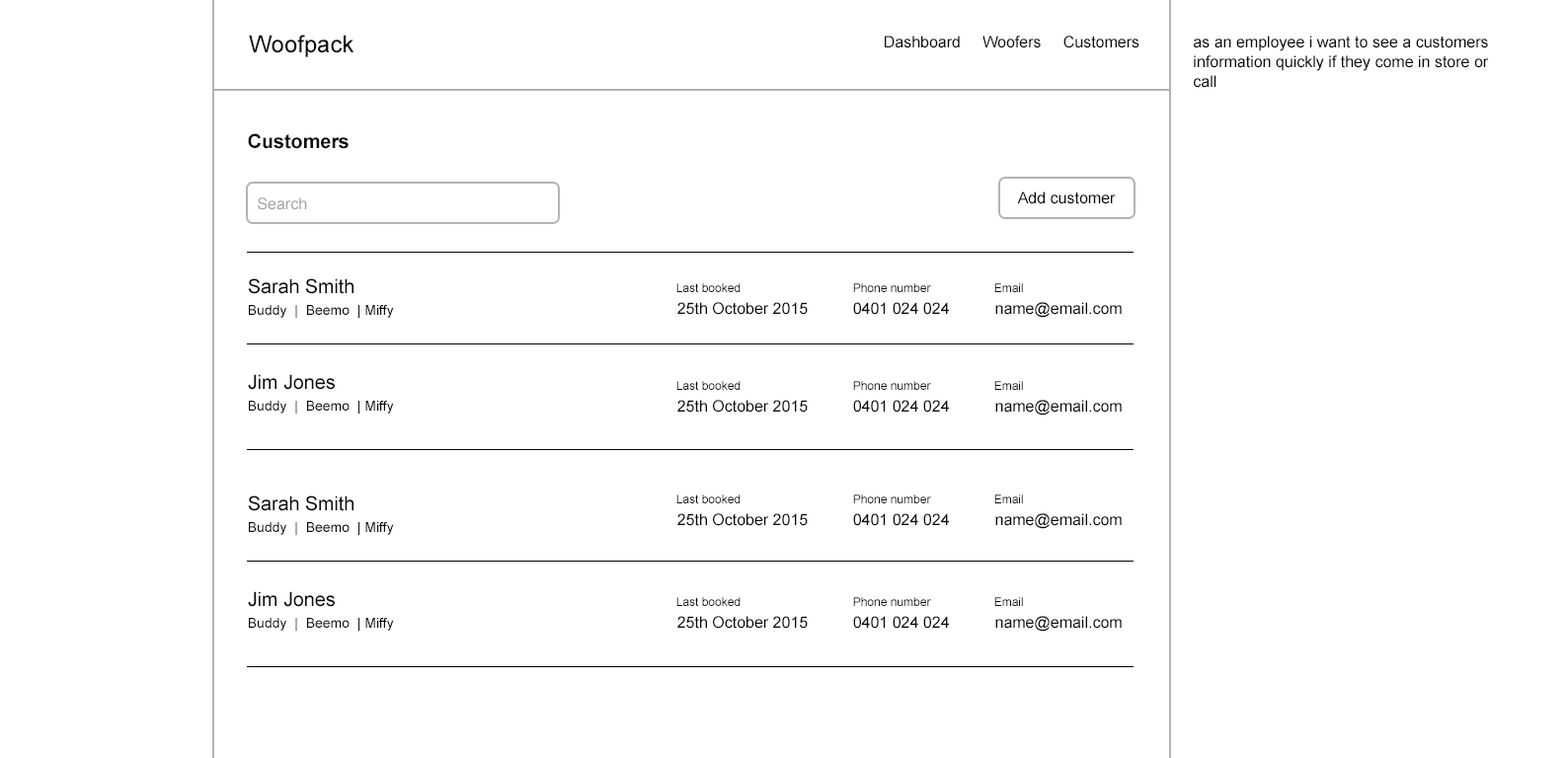
<style>
.page{position:relative;width:1568px;height:758px;background:#ffffff}
.page>*{position:absolute;margin:0}
.t1{font:23.7px "ArialMT";color:#0c0b0b}
.t2{font:15.8px "ArialMT";color:#0c0b0b}
.t3{font:15.8px/19.7px "ArialMT";color:#0c0b0b}
.t4{font:19.5px "Arial-BoldMT";color:#0c0b0b}
.t5{font:15.8px "ArialMT";color:#a5a5a5}
.t6{font:19.5px "ArialMT";color:#0c0b0b}
.t7{font:11.8px "ArialMT";color:#0c0b0b}
.t8{font:13.8px "ArialMT";color:#0c0b0b}
</style>
<div class="page">
<p class="t1" style="left:249px;top:35px;width:105px;height:22px">Woofpack</p>
<p class="t2" style="left:885px;top:36px;width:254px;height:12px">Dashboard     Woofers     Customers</p>
<p class="t3" style="left:1194px;top:36px;width:295px;height:52px">as an employee i want to see a customers information quickly if they come in store or call</p>
<p class="t4" style="left:248px;top:133px;width:101px;height:16px">Customers</p>
<p class="t5" style="left:258px;top:197px;width:49px;height:13px">Search</p>
<p class="t2" style="left:1017px;top:192px;width:99px;height:12px">Add customer</p>
<p class="t6" style="left:248px;top:278px;width:105px;height:16px">Sarah Smith</p>
<p class="t7" style="left:676px;top:283px;width:65px;height:9px">Last booked</p>
<p class="t7" style="left:853px;top:283px;width:78px;height:9px">Phone number</p>
<p class="t7" style="left:994px;top:283px;width:29px;height:9px">Email</p>
<p class="t8" style="left:249px;top:305px;width:145px;height:14px">Buddy  |  Beemo  | Miffy</p>
<p class="t2" style="left:677px;top:302px;width:131px;height:13px">25th October 2015</p>
<p class="t2" style="left:853px;top:302px;width:96px;height:13px">0401 024 024</p>
<p class="t2" style="left:995px;top:302px;width:127px;height:16px">name@email.com</p>
<p class="t6" style="left:248px;top:374px;width:87px;height:16px">Jim Jones</p>
<p class="t7" style="left:676px;top:381px;width:65px;height:9px">Last booked</p>
<p class="t7" style="left:853px;top:381px;width:78px;height:9px">Phone number</p>
<p class="t7" style="left:994px;top:381px;width:29px;height:9px">Email</p>
<p class="t8" style="left:249px;top:401px;width:145px;height:14px">Buddy  |  Beemo  | Miffy</p>
<p class="t2" style="left:677px;top:400px;width:131px;height:13px">25th October 2015</p>
<p class="t2" style="left:853px;top:400px;width:96px;height:13px">0401 024 024</p>
<p class="t2" style="left:995px;top:400px;width:127px;height:16px">name@email.com</p>
<p class="t6" style="left:248px;top:496px;width:105px;height:15px">Sarah Smith</p>
<p class="t7" style="left:676px;top:495px;width:65px;height:9px">Last booked</p>
<p class="t7" style="left:853px;top:495px;width:78px;height:9px">Phone number</p>
<p class="t7" style="left:994px;top:495px;width:29px;height:9px">Email</p>
<p class="t2" style="left:677px;top:513px;width:131px;height:13px">25th October 2015</p>
<p class="t2" style="left:853px;top:513px;width:96px;height:13px">0401 024 024</p>
<p class="t2" style="left:995px;top:513px;width:127px;height:16px">name@email.com</p>
<p class="t8" style="left:249px;top:522px;width:145px;height:14px">Buddy  |  Beemo  | Miffy</p>
<p class="t6" style="left:248px;top:591px;width:87px;height:16px">Jim Jones</p>
<p class="t7" style="left:676px;top:597px;width:65px;height:9px">Last booked</p>
<p class="t7" style="left:853px;top:597px;width:78px;height:9px">Phone number</p>
<p class="t7" style="left:994px;top:597px;width:29px;height:9px">Email</p>
<p class="t2" style="left:677px;top:616px;width:131px;height:13px">25th October 2015</p>
<p class="t2" style="left:853px;top:616px;width:96px;height:13px">0401 024 024</p>
<p class="t2" style="left:995px;top:616px;width:127px;height:16px">name@email.com</p>
<p class="t8" style="left:249px;top:618px;width:145px;height:14px">Buddy  |  Beemo  | Miffy</p>
</div>
